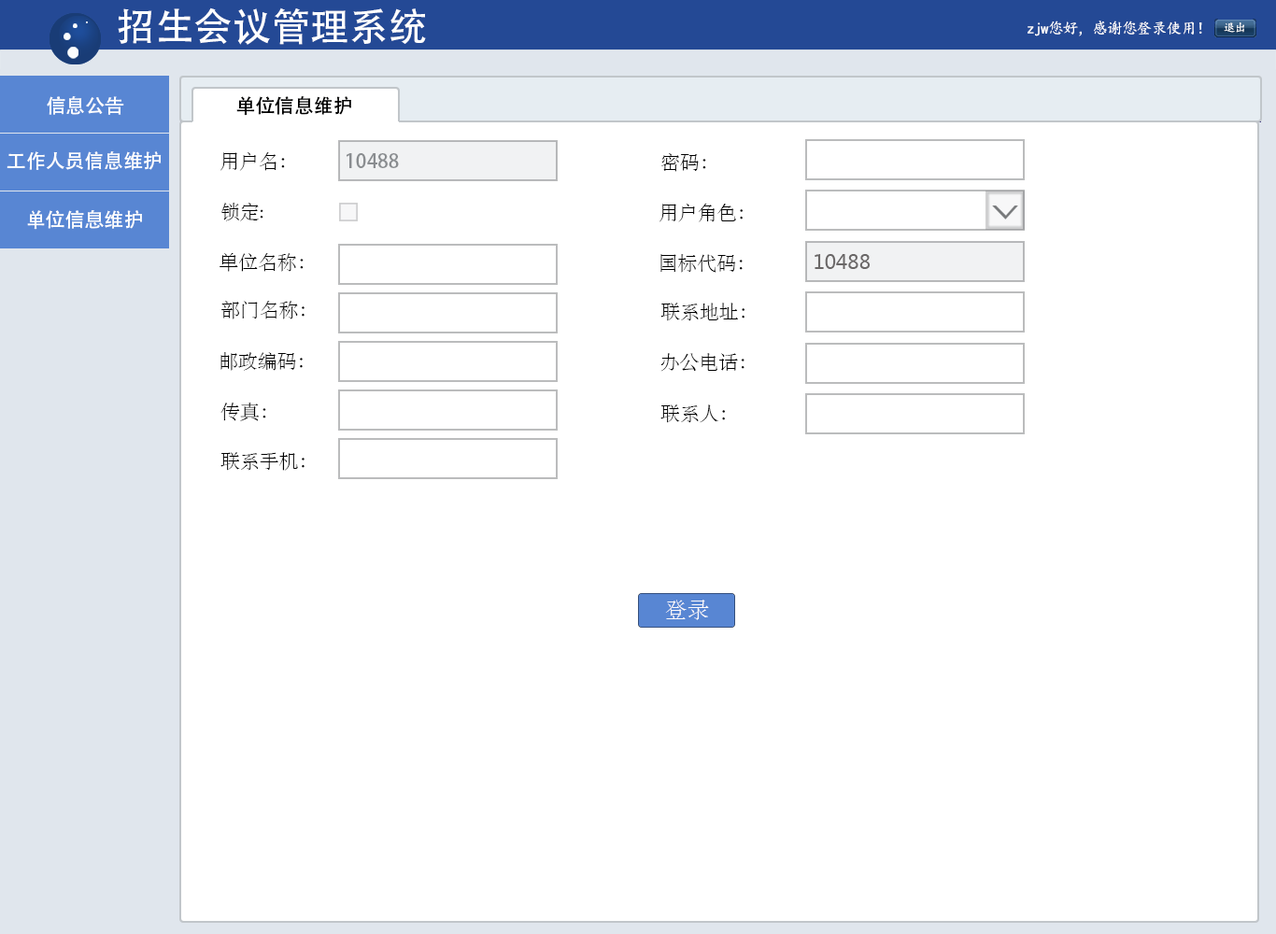
<style>
.page{position:relative;width:1276px;height:934px;background:#ffffff}
.page>*{position:absolute;margin:0}
.t1{font:38.9px "AdobeHeitiStd-Regular";color:#ffffff}
.t2{font:15.6px "KaiTi";letter-spacing:-0.05em;color:#ffffff}
.t3{font:11.7px "KaiTi";letter-spacing:-0.05em;color:#ffffff}
.t4{font:19.5px "AdobeHeitiStd-Regular";color:#fefefe}
.t5{font:19.5px "AdobeHeitiStd-Regular";color:#000000}
.t6{font:19.5px "STSong";color:#000000}
.t7{font:19.5px "AdobeHeitiStd-Regular";color:#8a8d90}
.t8{font:19.6px "MicrosoftYaHei";color:#6a6767}
.t9{font:22.1px "STSong";color:#fffbfb}
</style>
<div class="page">
<p class="t1" style="left:118px;top:7px;width:308px;height:38px">招生会议管理系统</p>
<p class="t2" style="left:1028px;top:21px;width:174px;height:15px">zjw您好，感谢您登录使用！</p>
<p class="t3" style="left:1224px;top:22px;width:21px;height:11px">退出</p>
<p class="t4" style="left:47px;top:96px;width:77px;height:19px">信息公告</p>
<p class="t5" style="left:236px;top:96px;width:115px;height:20px">单位信息维护</p>
<p class="t4" style="left:7px;top:151px;width:155px;height:19px">工作人员信息维护</p>
<p class="t6" style="left:220px;top:152px;width:65px;height:19px">用户名：</p>
<p class="t7" style="left:346px;top:153px;width:53px;height:15px">10488</p>
<p class="t6" style="left:661px;top:153px;width:45px;height:19px">密码：</p>
<p class="t6" style="left:221px;top:203px;width:42px;height:18px">锁定:</p>
<p class="t6" style="left:660px;top:204px;width:84px;height:18px">用户角色：</p>
<p class="t4" style="left:27px;top:210px;width:115px;height:20px">单位信息维护</p>
<p class="t6" style="left:220px;top:253px;width:84px;height:19px">单位名称：</p>
<p class="t6" style="left:661px;top:254px;width:82px;height:19px">国标代码：</p>
<p class="t8" style="left:815px;top:254px;width:56px;height:15px">10488</p>
<p class="t6" style="left:221px;top:301px;width:84px;height:19px">部门名称：</p>
<p class="t6" style="left:661px;top:303px;width:85px;height:18px">联系地址：</p>
<p class="t6" style="left:220px;top:352px;width:83px;height:19px">邮政编码：</p>
<p class="t6" style="left:661px;top:353px;width:84px;height:19px">办公电话：</p>
<p class="t6" style="left:220px;top:403px;width:46px;height:18px">传真：</p>
<p class="t6" style="left:661px;top:405px;width:65px;height:18px">联系人：</p>
<p class="t6" style="left:220px;top:452px;width:85px;height:19px">联系手机：</p>
<p class="t9" style="left:665px;top:600px;width:44px;height:20px">登录</p>
</div>
